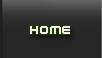
<style>
.page{position:relative;width:102px;height:58px;background:#262626}
.page>*{position:absolute;margin:0}
.t1{font:13px "Usuzi";color:#f5eaea}
</style>
<div class="page">
<p class="t1" style="left:30px;top:26px;width:40px;height:8px">Home</p>
</div>
